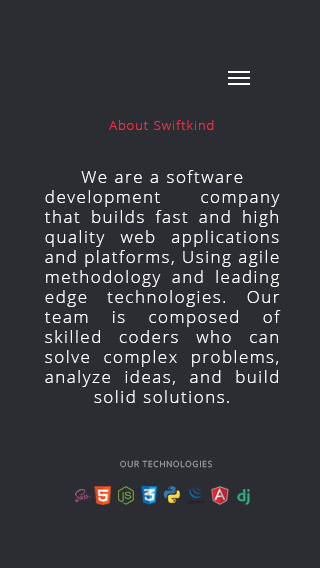
<style>
.page{position:relative;width:320px;height:568px;background:#2c2c33}
.page>*{position:absolute;margin:0}
.t1{font:12.5px "OpenSans-Light";letter-spacing:0.1em;color:#f72a46}
.t2{font:16.7px "OpenSans-Light";letter-spacing:0.1em;color:#ffffff}
.t3{font:8.3px "OpenSans-Light";letter-spacing:0.1em;color:#999999}
</style>
<div class="page">
<p class="t1" style="left:109px;top:120px;width:105px;height:10px">About Swiftkind</p>
<p class="t2" style="left:44px;top:170px;width:237px;height:233px;text-align:justify">We are a software <br>development company that builds fast and high quality web applications and platforms, Using agile methodology and leading edge technologies. Our team is composed of skilled coders who can solve complex problems, analyze ideas, and build solid solutions.</p>
<p class="t3" style="left:120px;top:460px;width:92px;height:8px">OUR TECHNOLOGIES</p>
</div>
